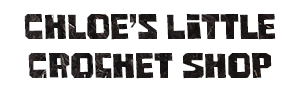
<style>
.page{position:relative;width:300px;height:92px;background:#ffffff}
.page>*{position:absolute;margin:0}
.t1{font:32.5px "Comrade-Bold";color:#1f1a19}
</style>
<div class="page">
<p class="t1" style="left:24px;top:14px;width:252px;height:65px;text-align:center">Chloe’s Little Crochet Shop</p>
</div>
